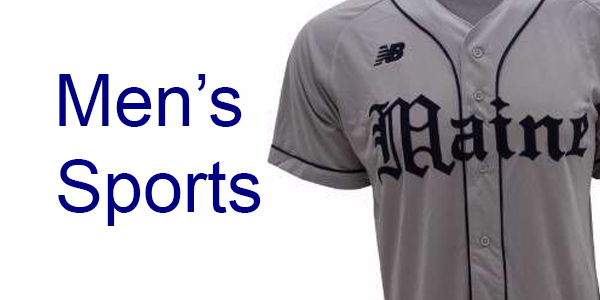
<style>
.page{position:relative;width:600px;height:300px;background:#ffffff}
.page>*{position:absolute;margin:0}
.t1{font:72px "ArialMT";color:#000080}
</style>
<div class="page">
<p class="t1" style="left:58px;top:74px;width:203px;height:152px;text-align:center">Men’s <br>Sports</p>
</div>
